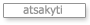
<style>
.page{position:relative;width:90px;height:25px;background:#ffffff}
.page>*{position:absolute;margin:0}
.t1{font:11px "Tahoma";color:#959595;font-weight:bold}
</style>
<div class="page">
<p class="t1" style="left:23px;top:5px;width:39px;height:11px">atsakyti</p>
</div>
